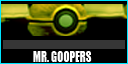
<style>
.page{position:relative;width:128px;height:64px;background:#000000}
.page>*{position:absolute;margin:0}
.t1{font:14px "Impact";color:#ffffff;scale:0.8 1}
</style>
<div class="page">
<p class="t1" style="left:33px;top:51px;width:59px;height:11px">MR. GOOPERS</p>
</div>
